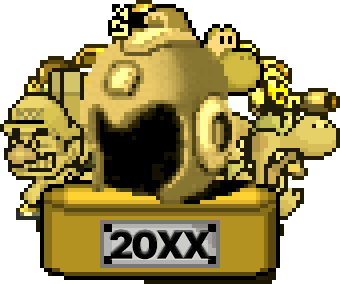
<style>
.page{position:relative;width:340px;height:284px;background:#ffffff}
.page>*{position:absolute;margin:0}
.t1{font:38px "InterTight-Black";letter-spacing:-0.05em;color:#000000}
</style>
<div class="page">
<p class="t1" style="left:110px;top:230px;width:100px;height:30px">20XX</p>
</div>
